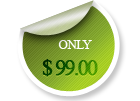
<style>
.page{position:relative;width:140px;height:101px;background:#ffffff}
.page>*{position:absolute;margin:0}
.t1{font:12.5px "TimesNewRomanPSMT";letter-spacing:-0.015em;color:#ffffff;text-transform:uppercase}
.t2{font:21.7px "TimesNewRomanPSMT";letter-spacing:-0.1em;text-transform:uppercase;font-weight:bold}
</style>
<div class="page">
<p class="t1" style="left:58px;top:40px;width:34px;height:9px">ONLY</p>
<p class="t2" style="left:42px;top:59px;width:56px;height:18px">$ 99.00</p>
</div>
